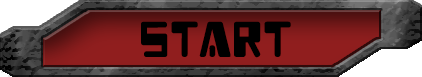
<style>
.page{position:relative;width:422px;height:77px}
.page>*{position:absolute;margin:0}
.t1{font:60px "HeavyData";color:#000000}
</style>
<div class="page">
<p class="t1" style="left:141px;top:21px;width:150px;height:37px">start</p>
</div>
